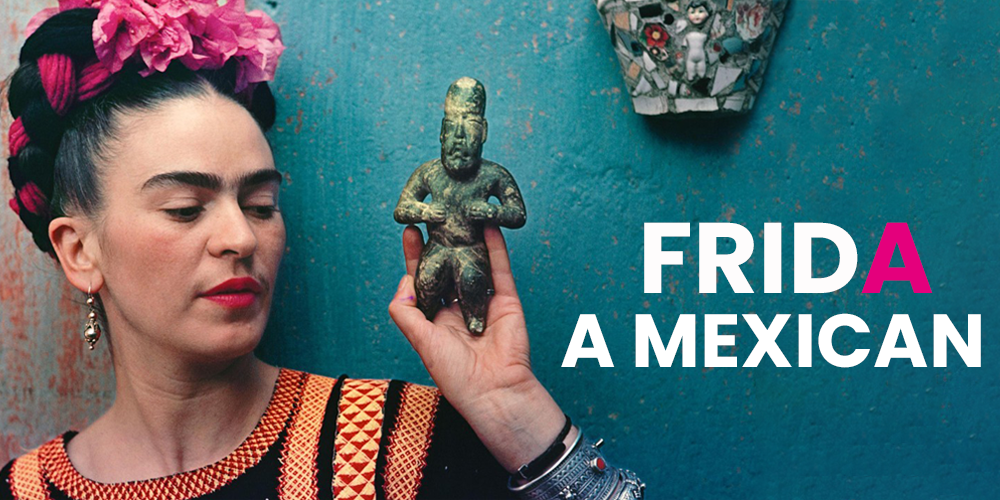
<style>
.page{position:relative;width:1000px;height:500px}
.page>*{position:absolute;margin:0}
.t1{font:75px "Poppins-Bold";color:#ffffff}
</style>
<div class="page">
<p class="t1" style="left:561px;top:313px;width:420px;height:55px">A MEXICAN</p>
</div>
